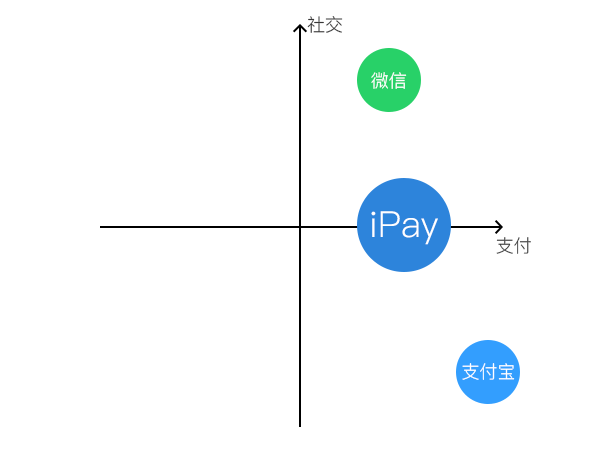
<style>
.page{position:relative;width:600px;height:450px;background:#ffffff}
.page>*{position:absolute;margin:0}
.t1{font:18px "PingFang-SC-Regular";color:#383737}
.t2{font:18px "PingFang-SC-Regular";color:#ffffff}
.t3{font:36px "PingFang-SC-Regular";color:#ffffff}
.t4{font:18px "PingFang-SC-Regular";color:#3c3c3c}
</style>
<div class="page">
<p class="t1" style="left:307px;top:16px;width:36px;height:17px">社交</p>
<p class="t2" style="left:371px;top:72px;width:36px;height:17px">微信</p>
<p class="t3" style="left:371px;top:211px;width:67px;height:34px">iPay</p>
<p class="t4" style="left:487px;top:237px;width:44px;height:17px"><span class="t2">z</span>支付</p>
<p class="t2" style="left:462px;top:363px;width:53px;height:17px">支付宝</p>
</div>
